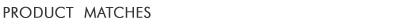
<style>
.page{position:relative;width:400px;height:24px;background:#ffffff}
.page>*{position:absolute;margin:0}
.t1{font:14.7px "FuturaBT-Light";letter-spacing:0.025em;color:#363636;text-transform:uppercase;font-weight:bold}
</style>
<div class="page">
<p class="t1" style="left:3px;top:6px;width:148px;height:12px">PRODUCT  MATCHES</p>
</div>
